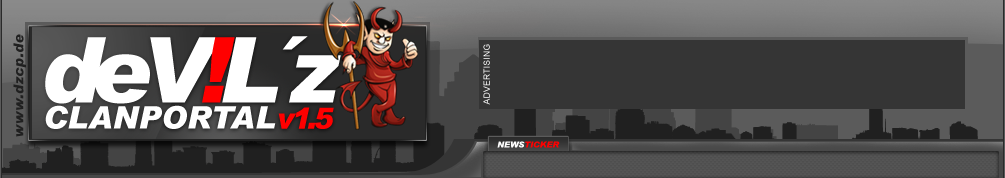
<style>
.page{position:relative;width:1005px;height:178px;background:#353535}
.page>*{position:absolute;margin:0}
.t1{font:13.5px "Arial-BlackItalic";letter-spacing:0.04em;color:#202020}
.t2{font:90.9px "Arial-BlackItalic";letter-spacing:-0.12em;color:#ffffff}
.t3{font:90.9px "Arial-BlackItalic";letter-spacing:-0.12em;color:#ff0000}
.t4{font:8.4px "ArialMT";letter-spacing:0.04em;color:#ffffff;text-transform:uppercase}
.t5{font:31.2px "Arial-BlackItalic";color:#ffffff;text-transform:uppercase}
.t6{font:29.5px "Arial-BlackItalic";letter-spacing:-0.12em;color:#ff0000}
.t7{font:8.2px "Arial-BlackItalic";color:#ff0000;text-transform:uppercase}
.t8{font:8.2px "Arial-BlackItalic";color:#ffffff;text-transform:uppercase}
</style>
<div class="page">
<p class="t1" style="left:13px;top:34px;width:13px;height:103px;rotate:-90deg">www.dzcp.de</p>
<p class="t2" style="left:45px;top:36px;width:296px;height:68px">deV<span class="t3">!</span>L´z</p>
<p class="t4" style="left:483px;top:44px;width:7px;height:61px;rotate:-90deg">advertising</p>
<p class="t5" style="left:45px;top:105px;width:231px;height:24px">ClanPortal</p>
<p class="t6" style="left:278px;top:107px;width:56px;height:22px">v1.5</p>
<p class="t7" style="left:497px;top:141px;width:63px;height:7px"><span class="t8">news</span>ticker</p>
</div>
